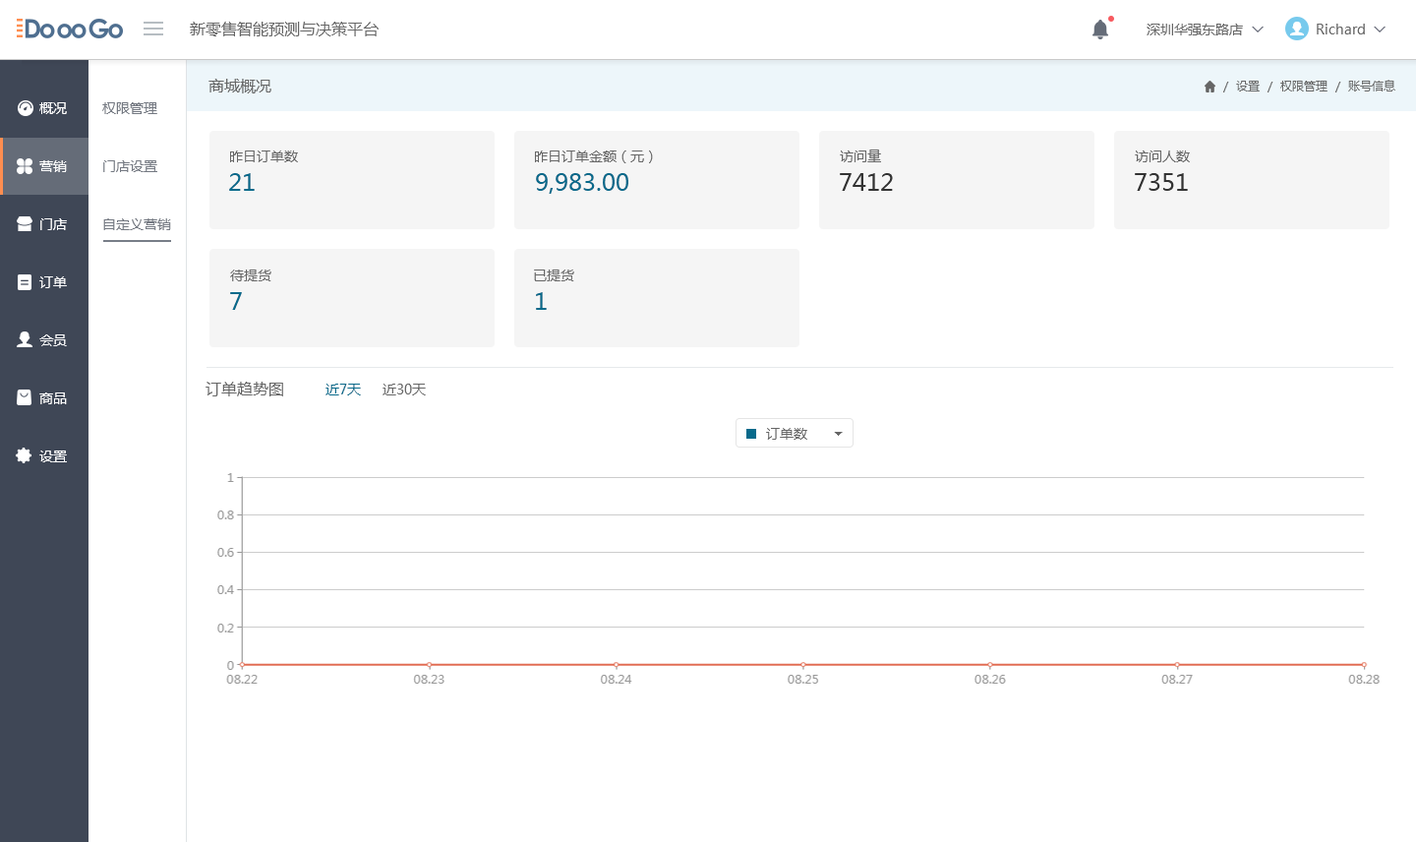
<style>
.page{position:relative;width:1416px;height:842px;background:#ffffff}
.page>*{position:absolute;margin:0}
.t1{font:15.7px "MicrosoftYaHeiUI";color:#666666}
.t2{font:13.8px "MicrosoftYaHeiUI";color:#666666}
.t3{font:13.8px "Marlett";color:#666666}
.t4{font:11.8px "MicrosoftYaHeiUI";color:#666666}
.t5{font:13.8px/58px "MicrosoftYaHeiUI";color:#ffffff}
.t6{font:13.8px/58px "MicrosoftYaHeiUI";color:#747982}
.t7{font:23.6px "MicrosoftYaHeiUI";color:#086a8b}
.t8{font:23.6px "MicrosoftYaHeiUI";color:#333333}
.t9{font:13.8px "MicrosoftYaHeiUI";color:#086a8b}
</style>
<div class="page">
<p class="t1" style="left:190px;top:22px;width:189px;height:14px">新零售智能预测与决策平台</p>
<p class="t2" style="left:1147px;top:24px;width:96px;height:11px">深圳华强东路店</p>
<p class="t2" style="left:1317px;top:24px;width:64px;height:10px">Richard <span class="t3">6</span></p>
<p class="t1" style="left:209px;top:79px;width:62px;height:14px">商城概况</p>
<p class="t4" style="left:1224px;top:80px;width:172px;height:12px">/  设置  /  权限管理  /  账号信息</p>
<p class="t5" style="left:39px;top:102px;width:28px;height:360px">概况<br>营销<br>门店<br>订单<br>会员<br>商品<br>设置</p>
<p class="t6" style="left:102px;top:102px;width:69px;height:128px">权限管理<br>门店设置<br>自定义营销</p>
<p class="t2" style="left:840px;top:150px;width:41px;height:12px">访问量</p>
<p class="t2" style="left:230px;top:150px;width:68px;height:12px">昨日订单数</p>
<p class="t2" style="left:535px;top:150px;width:118px;height:13px">昨日订单金额（元）</p>
<p class="t2" style="left:1135px;top:150px;width:55px;height:12px">访问人数</p>
<p class="t7" style="left:229px;top:173px;width:26px;height:18px">21</p>
<p class="t7" style="left:536px;top:173px;width:92px;height:21px">9,983.00</p>
<p class="t8" style="left:840px;top:173px;width:53px;height:18px">7412</p>
<p class="t8" style="left:1135px;top:173px;width:53px;height:18px">7351</p>
<p class="t2" style="left:230px;top:269px;width:41px;height:12px">待提货</p>
<p class="t2" style="left:534px;top:269px;width:40px;height:12px">已提货</p>
<p class="t7" style="left:230px;top:292px;width:12px;height:18px">7</p>
<p class="t7" style="left:536px;top:292px;width:11px;height:18px">1</p>
<p class="t1" style="left:206px;top:382px;width:77px;height:14px">订单趋势图</p>
<p class="t9" style="left:326px;top:384px;width:35px;height:11px">近7天</p>
<p class="t2" style="left:383px;top:384px;width:43px;height:11px">近30天</p>
<p class="t2" style="left:766px;top:428px;width:41px;height:12px">订单数</p>
</div>
